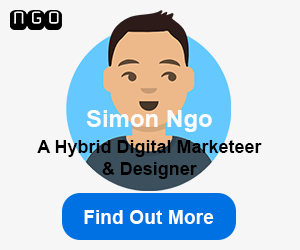
<style>
.page{position:relative;width:300px;height:250px;background:#f6f6f6}
.page>*{position:absolute;margin:0}
.t1{font:24px "Arial-BoldMT";color:#ffffff}
.t2{font:18px "Arial-BoldMT";color:#000000}
.t3{font:19.3px "Arial-BoldMT";color:#ffffff}
</style>
<div class="page">
<p class="t1" style="left:86px;top:110px;width:126px;height:22px;opacity:0.95">Simon Ngo</p>
<p class="t2" style="left:37px;top:140px;width:225px;height:39px;text-align:center">A Hybrid Digital Marketeer<br>&amp; Designer</p>
<p class="t3" style="left:84px;top:210px;width:130px;height:14px">Find Out More</p>
</div>
